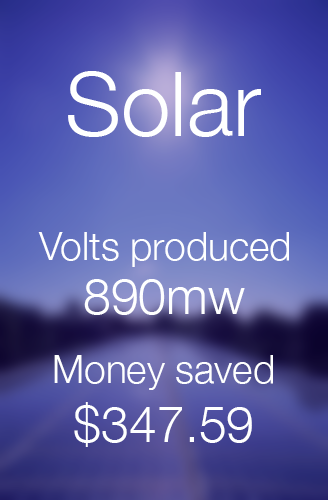
<style>
.page{position:relative;width:328px;height:500px}
.page>*{position:absolute;margin:0}
.t1{font:88.9px "HelveticaNeue-Light";color:#feffff}
.t2{font:38.9px "HelveticaNeue-Light";color:#feffff}
.t3{font:50px "HelveticaNeue-Light";color:#feffff}
</style>
<div class="page">
<p class="t1" style="left:68px;top:71px;width:193px;height:66px">Solar</p>
<p class="t2" style="left:38px;top:232px;width:251px;height:35px">Volts produced</p>
<p class="t3" style="left:84px;top:279px;width:161px;height:36px">890mw</p>
<p class="t2" style="left:54px;top:355px;width:219px;height:35px">Money saved</p>
<p class="t3" style="left:74px;top:402px;width:178px;height:45px">$347.59</p>
</div>
